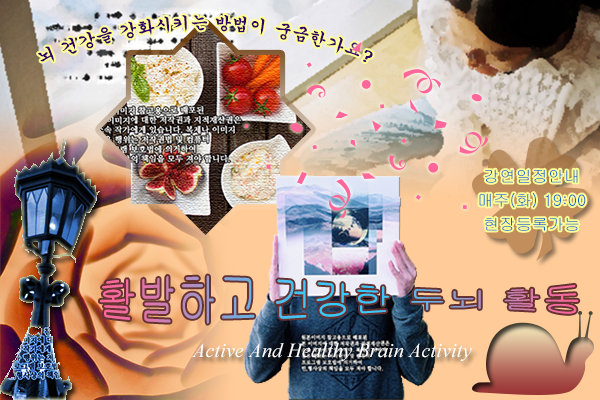
<style>
.page{position:relative;width:600px;height:400px}
.page>*{position:absolute;margin:0}
.t1{font:17px/24px "Gungsuh";letter-spacing:0.01em;color:#330066}
.t2{font:16px/24px "Gulim";letter-spacing:0.01em;color:#0066cc}
.t3{font:40px "Gulim";letter-spacing:0.01em}
.t4{font:20px "TimesNewRomanPS-ItalicMT";letter-spacing:0.01em;color:#ffffff}
</style>
<div class="page">
<p class="t1" style="left:38px;top:15px;width:335px;height:47px;text-align:center">뇌 건강을 강화시키는 방법이 궁금한가요?</p>
<p class="t2" style="left:479px;top:169px;width:107px;height:62px;text-align:center">강연일정안내<br>매주(화) 19:00<br>현장등록가능</p>
<p class="t3" style="left:100px;top:275px;width:479px;height:49px">활발하고 건강한 두뇌 활동</p>
<p class="t4" style="left:191px;top:343px;width:281px;height:19px">Active And Healthy Brain Activity</p>
</div>
